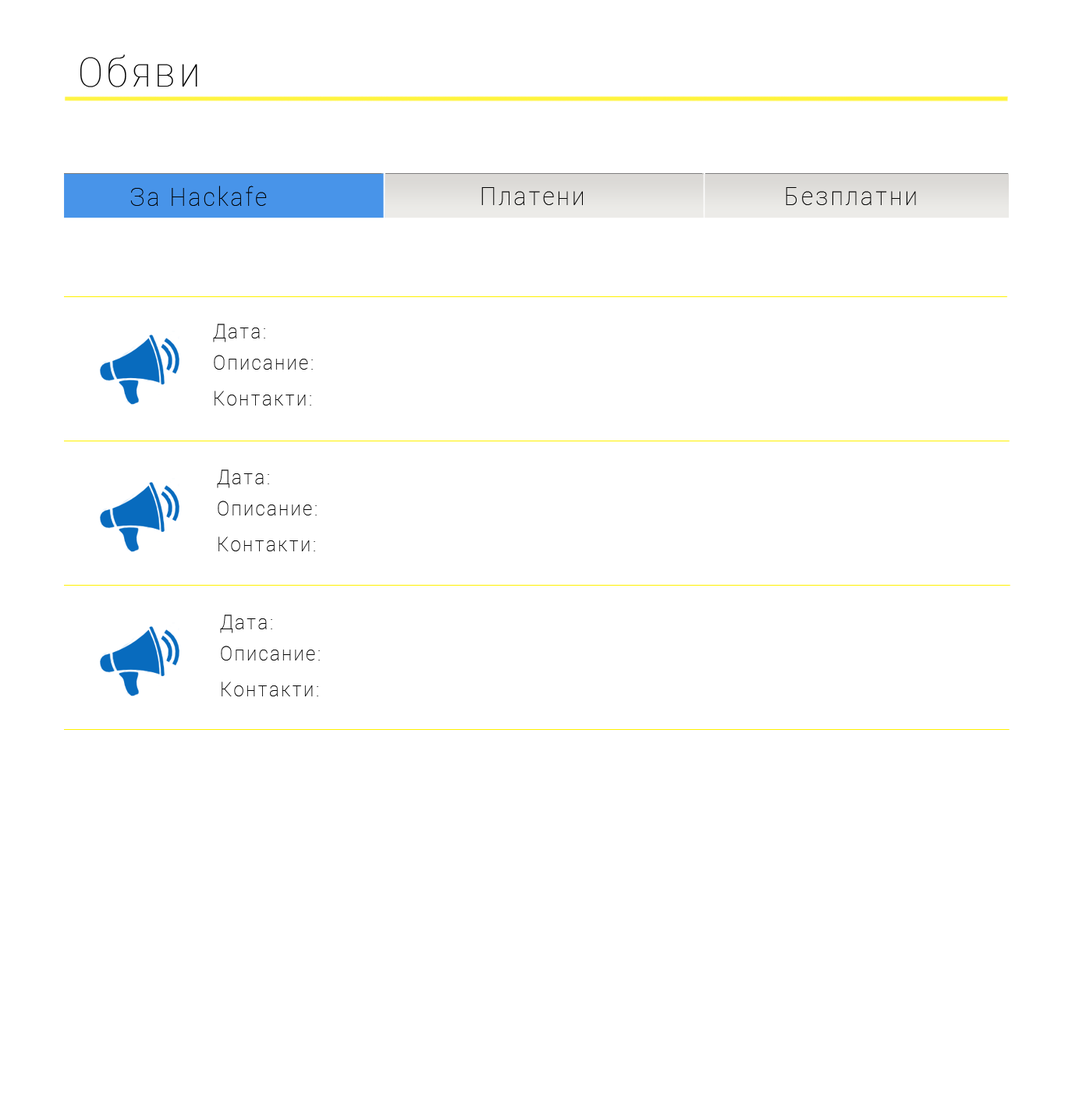
<style>
.page{position:relative;width:1072px;height:1112px;background:#ffffff}
.page>*{position:absolute;margin:0}
.t1{font:41.2px "Roboto-Thin";letter-spacing:0.1em;color:#000000;scale:0.91 1}
.t2{font:25.7px "Roboto-Thin";letter-spacing:0.1em;color:#000000;scale:0.91 1}
.t3{font:20.6px/5.1px "Roboto-Thin";letter-spacing:0.1em;color:#000000;scale:0.91 1}
</style>
<div class="page">
<p class="t1" style="left:80px;top:55px;width:117px;height:32px">Обяви</p>
<p class="t2" style="left:130px;top:186px;width:137px;height:20px">За Hackafe</p>
<p class="t2" style="left:481px;top:187px;width:102px;height:18px">Платени</p>
<p class="t2" style="left:786px;top:187px;width:130px;height:18px">Безплатни</p>
<p class="t3" style="left:213px;top:324px;width:100px;height:82px">Дата:<br><br><br><br><br><br>Описание:<br><br><br><br><br><br><br>Контакти:</p>
<p class="t3" style="left:217px;top:470px;width:100px;height:82px">Дата:<br><br><br><br><br><br>Описание:<br><br><br><br><br><br><br>Контакти:</p>
<p class="t3" style="left:220px;top:615px;width:100px;height:82px">Дата:<br><br><br><br><br><br>Описание:<br><br><br><br><br><br><br>Контакти:</p>
</div>
